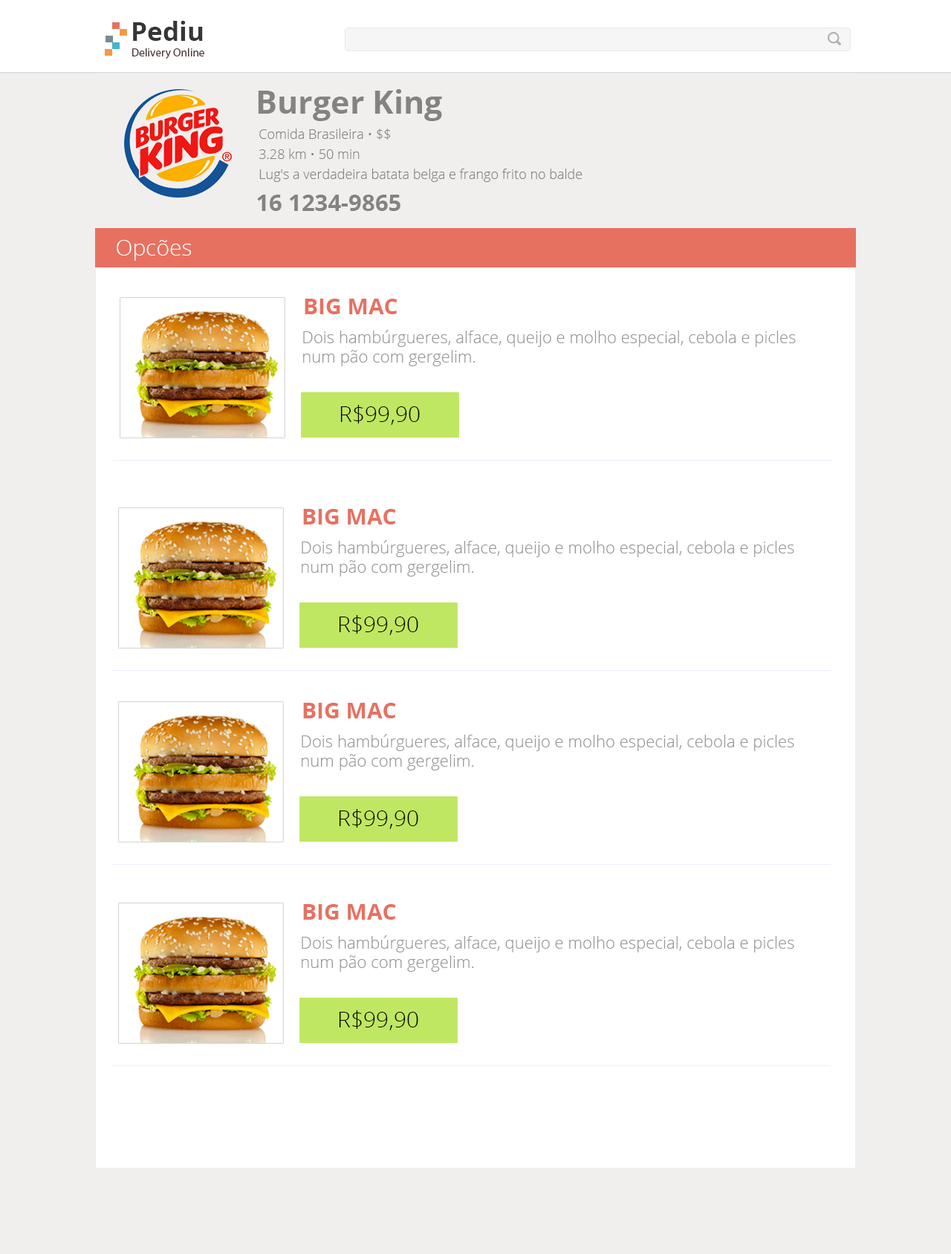
<style>
.page{position:relative;width:951px;height:1254px;background:#ffffff}
.page>*{position:absolute;margin:0}
.t1{font:26.3px "OpenSans-Bold";color:#363636}
.t2{font:11.4px "MyriadPro-Regular";color:#503737}
.t3{font:31.9px "OpenSans-Bold";color:#878282}
.t4{font:13.4px/20.1px "OpenSans-Light";color:#878282}
.t5{font:23.2px "OpenSans-Bold";color:#878282}
.t6{font:22.3px "OpenSans-Light";color:#ffffff}
.t7{font:22.3px "OpenSans-Bold";color:#e77161}
.t8{font:16.4px "OpenSans-Light";color:#969696}
.t9{font:22.3px "OpenSans-Light";color:#000000}
</style>
<div class="page">
<p class="t1" style="left:133px;top:21px;width:70px;height:20px">Pediu</p>
<p class="t2" style="left:132px;top:48px;width:72px;height:11px">Delivery Online</p>
<p class="t3" style="left:258px;top:89px;width:184px;height:32px">Burger King</p>
<p class="t4" style="left:259px;top:129px;width:323px;height:53px">Comida Brasileira • $$<br>3.28 km • 50 min<br>Lug's a verdadeira batata belga e frango frito no balde</p>
<p class="t5" style="left:257px;top:195px;width:143px;height:16px">16 1234-9865</p>
<p class="t6" style="left:117px;top:240px;width:75px;height:21px">Opcões</p>
<p class="t7" style="left:305px;top:299px;width:92px;height:15px">BIG MAC</p>
<p class="t8" style="left:303px;top:330px;width:493px;height:36px">Dois hambúrgueres, alface, queijo e molho especial, cebola e picles num pão com gergelim.</p>
<p class="t9" style="left:340px;top:405px;width:80px;height:20px">R$99,90</p>
<p class="t7" style="left:303px;top:509px;width:93px;height:15px">BIG MAC</p>
<p class="t8" style="left:302px;top:540px;width:492px;height:36px">Dois hambúrgueres, alface, queijo e molho especial, cebola e picles num pão com gergelim.</p>
<p class="t9" style="left:339px;top:615px;width:79px;height:20px">R$99,90</p>
<p class="t7" style="left:303px;top:703px;width:93px;height:15px">BIG MAC</p>
<p class="t8" style="left:302px;top:734px;width:492px;height:36px">Dois hambúrgueres, alface, queijo e molho especial, cebola e picles num pão com gergelim.</p>
<p class="t9" style="left:339px;top:809px;width:79px;height:20px">R$99,90</p>
<p class="t7" style="left:303px;top:904px;width:93px;height:16px">BIG MAC</p>
<p class="t8" style="left:302px;top:935px;width:492px;height:37px">Dois hambúrgueres, alface, queijo e molho especial, cebola e picles num pão com gergelim.</p>
<p class="t9" style="left:339px;top:1010px;width:79px;height:20px">R$99,90</p>
</div>
